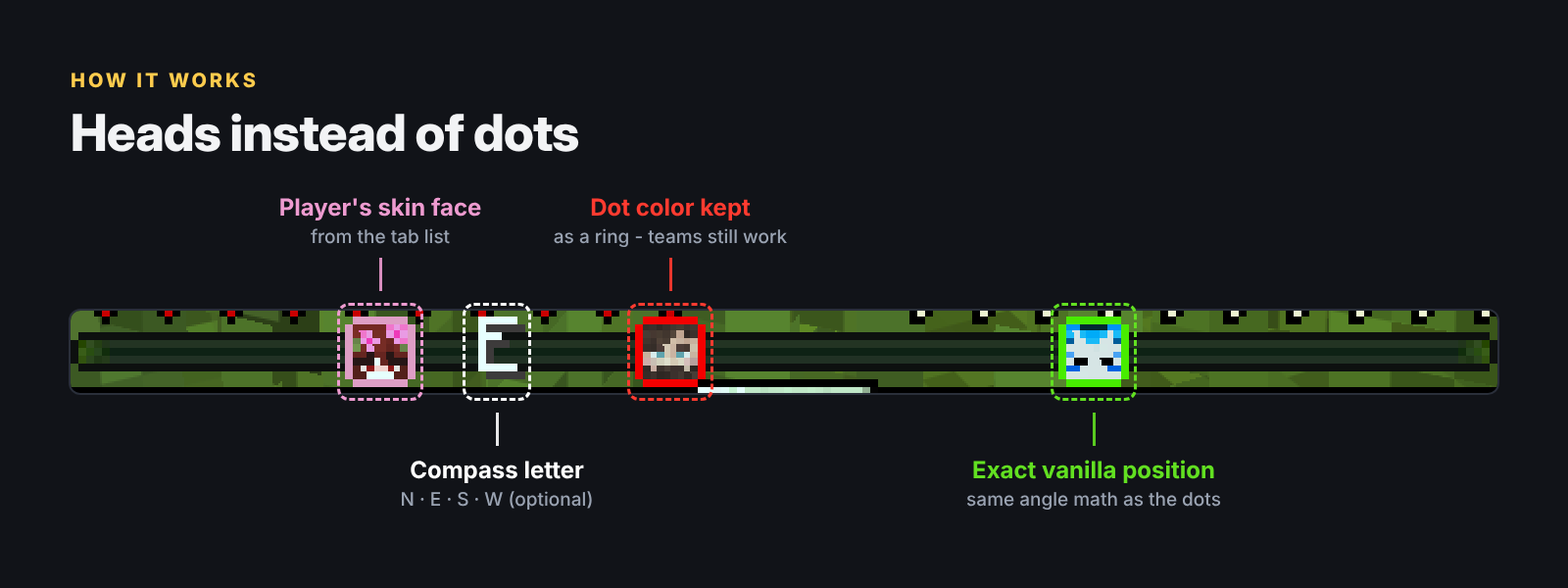
<style>
.page{position:relative;width:1568px;height:588px;background:#111318}
.page>*{position:absolute;margin:0}
.t1{font:19.6px "Inter-ExtraBold";letter-spacing:0.15em;color:#ffcc4d}
.t2{font:51px "InterDisplay-ExtraBold";letter-spacing:-0.015em;color:#f2f3f5}
.t3{font:23.5px "Inter-Bold";color:#ee9bd0}
.t4{font:23.5px "Inter-Bold";color:#ff3b30}
.t5{font:18.6px "Inter-Medium";color:#9aa3b2}
.t6{font:23.5px "Inter-Bold";color:#ffffff}
.t7{font:23.5px "Inter-Bold";color:#62e021}
</style>
<div class="page">
<p class="t1" style="left:72px;top:73px;width:184px;height:15px">HOW IT WORKS</p>
<p class="t2" style="left:73px;top:113px;width:506px;height:39px">Heads instead of dots</p>
<p class="t3" style="left:280px;top:197px;width:201px;height:23px">Player's skin face</p>
<p class="t4" style="left:591px;top:198px;width:160px;height:22px">Dot color kept</p>
<p class="t5" style="left:311px;top:228px;width:139px;height:16px">from the tab list</p>
<p class="t5" style="left:554px;top:228px;width:233px;height:19px">as a ring - teams still work</p>
<p class="t6" style="left:411px;top:461px;width:173px;height:22px">Compass letter</p>
<p class="t7" style="left:973px;top:460px;width:241px;height:23px">Exact vanilla position</p>
<p class="t5" style="left:402px;top:491px;width:190px;height:19px">N · E · S · W (optional)</p>
<p class="t5" style="left:966px;top:492px;width:255px;height:18px">same angle math as the dots</p>
</div>
